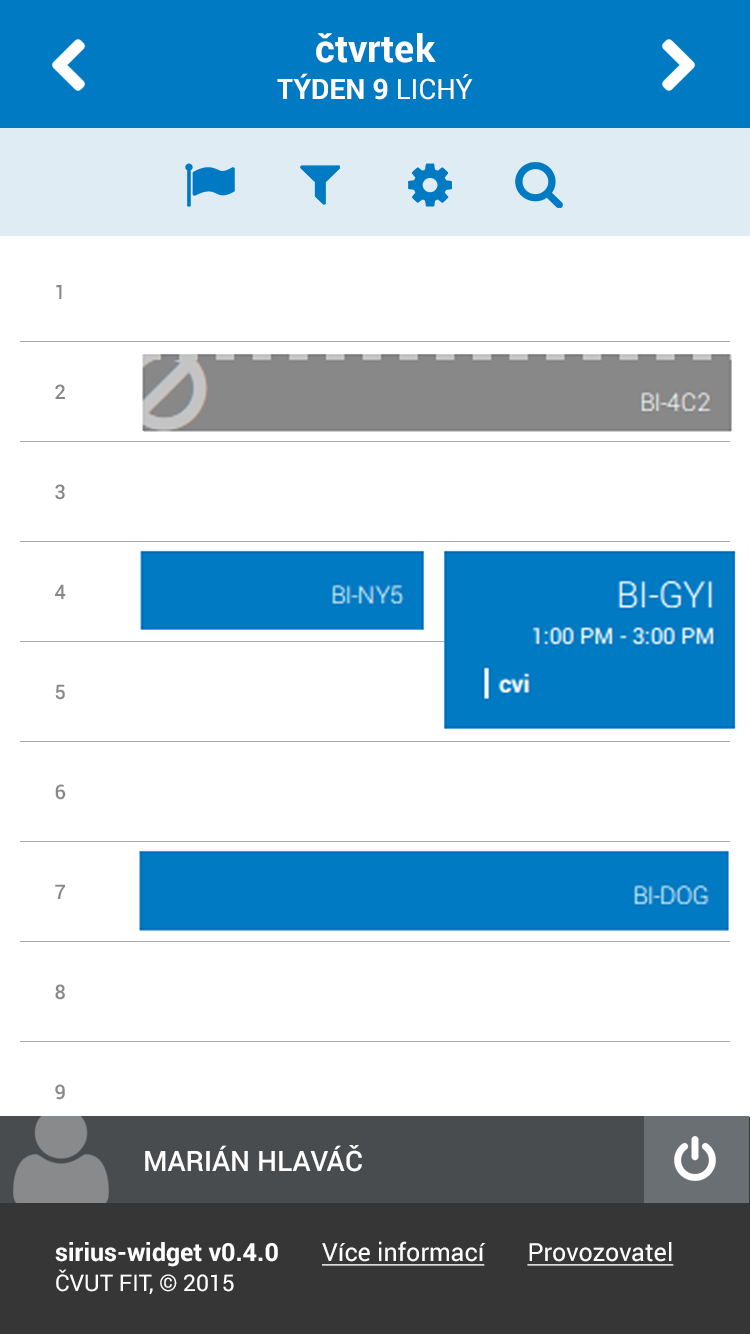
<style>
.page{position:relative;width:750px;height:1334px;background:#ffffff}
.page>*{position:absolute;margin:0}
.t1{font:38px "Roboto-Bold";color:#ffffff}
.t2{font:28px "Roboto-Bold";color:#ffffff}
.t3{font:28px "Roboto-Regular";color:#ffffff}
.t4{font:20px/97px "Roboto-Medium";color:#888888}
.t5{font:28px "Roboto-Medium";color:#ffffff}
.t6{font:25px "Roboto-Regular";color:#ffffff;text-decoration:underline}
.t7{font:25px "Roboto-Bold";color:#ffffff}
.t8{font:23px "Roboto-Regular";color:#ffffff}
</style>
<div class="page">
<p class="t1" style="left:316px;top:33px;width:120px;height:30px">čtvrtek</p>
<p class="t2" style="left:277px;top:73px;width:196px;height:27px">TÝDEN 9<span class="t3"> LICHÝ</span></p>
<p class="t4" style="left:50px;top:284px;width:21px;height:916px;text-align:center">1<br>2<br>3<br>4<br>5<br>6<br>7<br>8<br>9<br>10<br>11<br>12<br>13<br>14<br>15</p>
<p class="t5" style="left:145px;top:1145px;width:217px;height:27px">MARIÁN HLAVÁČ</p>
<p class="t6" style="left:55px;top:1241px;width:619px;height:53px"><span class="t7">sirius-widget v0.4.0       </span>Více informací       Provozovatel<br><span class="t8">ČVUT FIT, © 2015</span></p>
</div>
